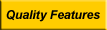
<style>
.page{position:relative;width:107px;height:30px;background:#ffcc00}
.page>*{position:absolute;margin:0}
.t1{font:12px "Arial-BoldItalicMT";color:#000000}
</style>
<div class="page">
<p class="t1" style="left:6px;top:10px;width:94px;height:12px">Quality Features</p>
</div>
